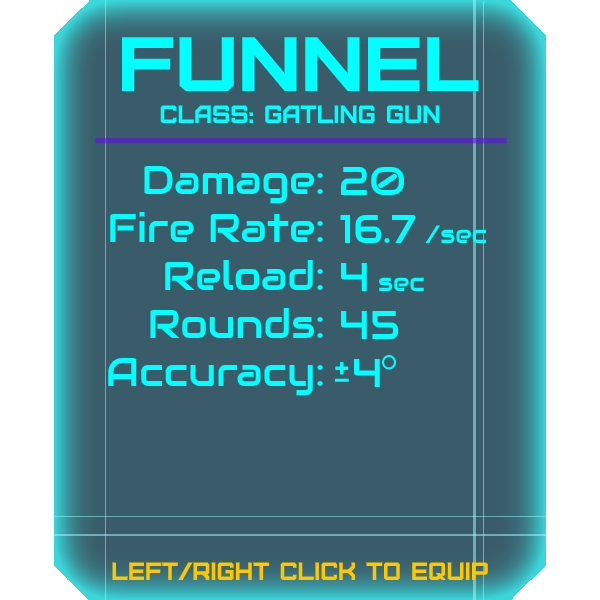
<style>
.page{position:relative;width:600px;height:600px;background:#3a5c6a}
.page>*{position:absolute;margin:0}
.t1{font:76.8px "Furore";color:#00ffff;scale:1.13 1}
.t2{font:25px "Furore";color:#00ffff}
.t3{font:40px "Audiowide-Regular";color:#00ffff}
.t4{font:25px "Audiowide-Regular";color:#00ffff}
.t5{font:25px "Furore";color:#ffc700}
</style>
<div class="page">
<p class="t1" style="left:122px;top:37px;width:357px;height:54px">funnel</p>
<p class="t2" style="left:160px;top:105px;width:280px;height:18px">Class: gatling gun</p>
<p class="t3" style="left:108px;top:165px;width:215px;height:231px;text-align:right">Damage:<br>Fire Rate:<br>Reload:<br>Rounds:<br>Accuracy:</p>
<p class="t3" style="left:340px;top:166px;width:146px;height:221px">20<br>16.7 <span class="t4">/sec<br></span>4 <span class="t4">sec<br></span>45<br> 4</p>
<p class="t5" style="left:112px;top:562px;width:376px;height:18px">left/right click to equip</p>
</div>
